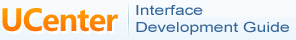
<style>
.page{position:relative;width:296px;height:40px}
.page>*{position:absolute;margin:0}
.t1{font:14px "ArialMT";color:#336699;scale:1.25 1}
</style>
<div class="page">
<p class="t1" style="left:135px;top:3px;width:155px;height:33px">Interface<br>Development Guide</p>
</div>
